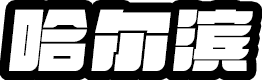
<style>
.page{position:relative;width:262px;height:80px;background:#ffffff}
.page>*{position:absolute;margin:0}
.t1{font:81.8px "zihunqijiyuzhouti_trial";color:#ffffff}
</style>
<div class="page">
<p class="t1" style="left:9px;top:9px;width:244px;height:62px">哈尔滨</p>
</div>
